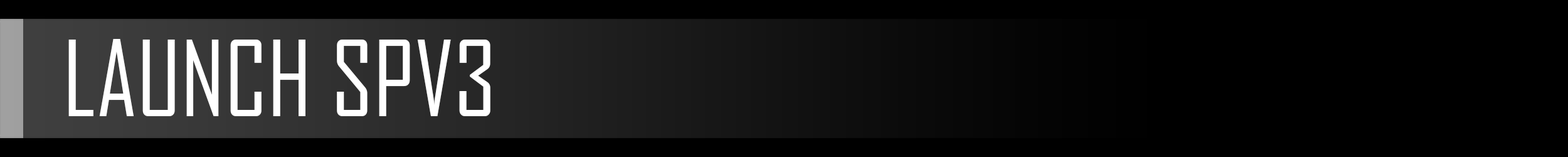
<style>
.page{position:relative;width:1568px;height:157px;background:#000000}
.page>*{position:absolute;margin:0}
.t1{font:100.4px "AgencyFB-Reg";color:#ffffff}
</style>
<div class="page">
<p class="t1" style="left:68px;top:39px;width:422px;height:77px">LAUNCH SPV3</p>
</div>
